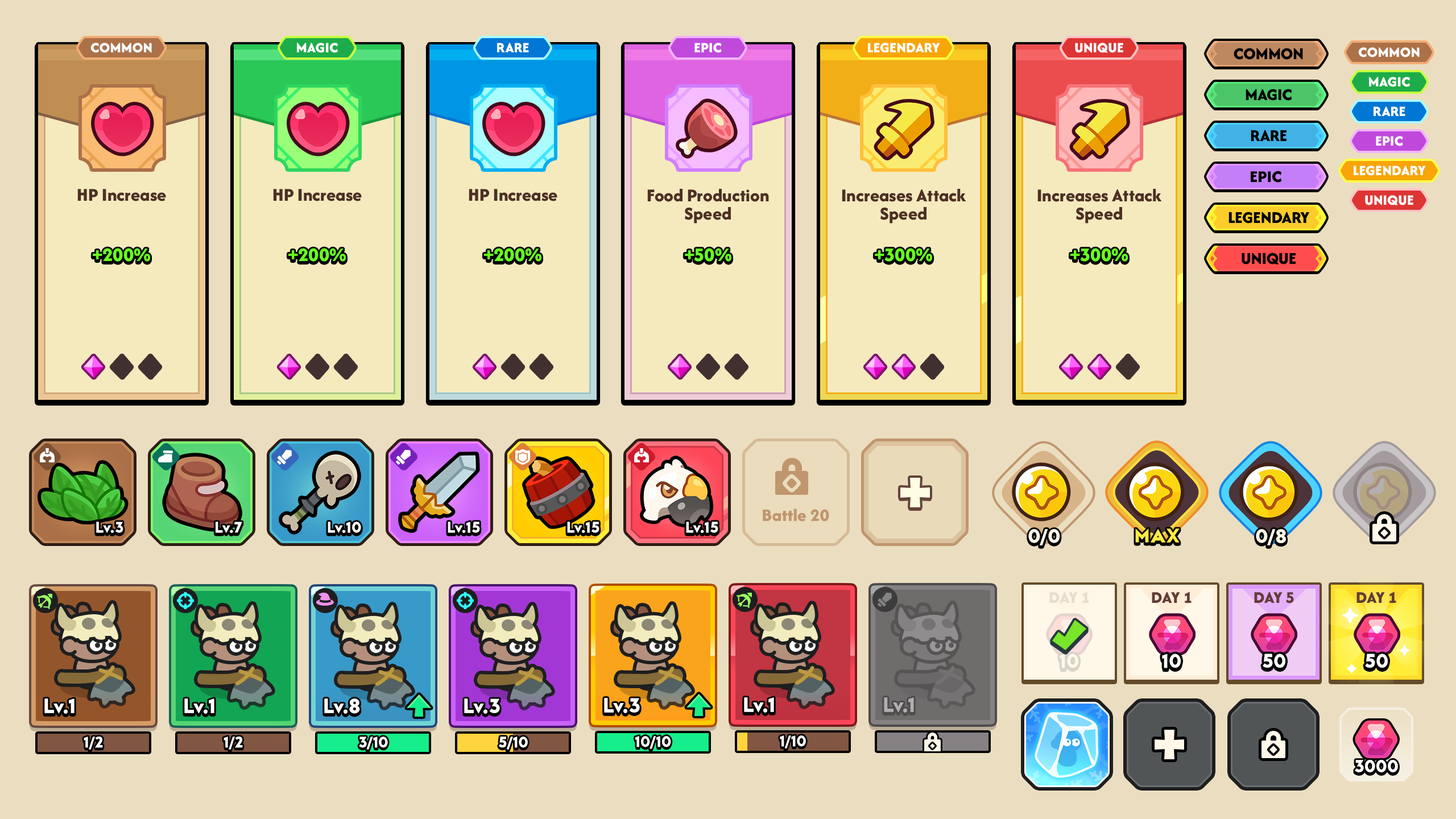
<style>
.page{position:relative;width:1456px;height:819px;background:#ebdec0}
.page>*{position:absolute;margin:0}
.t1{font:14.8px "AfacadFlux-ExtraBold";color:#ffffff;text-transform:uppercase}
.t2{font:17.2px "AfacadFlux-ExtraBold";letter-spacing:-0.02em;color:#000000;text-transform:uppercase}
.t3{font:17.1px "AfacadFlux-ExtraBold";color:#000000;text-transform:uppercase}
.t4{font:18.8px "AfacadFlux-ExtraBold";color:#4d3024}
.t5{font:18.8px/18.2px "AfacadFlux-ExtraBold";color:#4d3024}
.t6{font:19.9px "AfacadFlux-ExtraBold";color:#69ff20;text-transform:uppercase}
.t7{font:18.2px "AfacadFlux-ExtraBold";color:#c0966e}
.t8{font:15.9px "LTAvocado-Bold";color:#ffffff}
.t9{font:20.5px "LTAvocado-Bold";color:#fff8e9;text-transform:uppercase}
.t10{font:20.5px "LTAvocado-Bold";color:#ffeb44;text-transform:uppercase}
.t11{font:17.1px "AfacadFlux-ExtraBold";color:#e8dcce;text-transform:uppercase}
.t12{font:17.1px "AfacadFlux-ExtraBold";color:#633b37;text-transform:uppercase}
.t13{font:20.5px "LTAvocado-Bold";color:#ffffff}
.t14{font:21.3px "LTAvocado-Bold";color:#ffffff}
.t15{font:21.3px "LTAvocado-Bold";color:#b1b0b0}
.t16{font:18.2px "LTAvocado-Bold";color:#ffffff;text-transform:uppercase}
</style>
<div class="page">
<p class="t1" style="left:90px;top:43px;width:62px;height:10px">Common</p>
<p class="t1" style="left:297px;top:43px;width:41px;height:10px">Magic</p>
<p class="t1" style="left:497px;top:43px;width:32px;height:9px">Rare</p>
<p class="t1" style="left:694px;top:43px;width:28px;height:10px">Epic</p>
<p class="t1" style="left:868px;top:43px;width:72px;height:10px">Legendary</p>
<p class="t1" style="left:1075px;top:43px;width:48px;height:10px">Unique</p>
<p class="t2" style="left:1234px;top:48px;width:69px;height:12px">Common</p>
<p class="t1" style="left:1358px;top:47px;width:62px;height:10px">Common</p>
<p class="t1" style="left:1369px;top:77px;width:41px;height:10px">Magic</p>
<p class="t2" style="left:1246px;top:89px;width:46px;height:12px">Magic</p>
<p class="t1" style="left:1374px;top:106px;width:31px;height:10px">Rare</p>
<p class="t2" style="left:1251px;top:130px;width:35px;height:11px">Rare</p>
<p class="t1" style="left:1376px;top:136px;width:27px;height:10px">Epic</p>
<p class="t3" style="left:1251px;top:171px;width:31px;height:12px">Epic</p>
<p class="t1" style="left:1354px;top:166px;width:72px;height:10px">Legendary</p>
<p class="t4" style="left:77px;top:189px;width:89px;height:12px">HP Increase</p>
<p class="t4" style="left:273px;top:189px;width:89px;height:12px">HP Increase</p>
<p class="t4" style="left:469px;top:189px;width:88px;height:12px">HP Increase</p>
<p class="t5" style="left:647px;top:189px;width:122px;height:35px;text-align:center">Food Production<br>Speed</p>
<p class="t5" style="left:842px;top:189px;width:124px;height:35px;text-align:center">Increases Attack<br>Speed</p>
<p class="t5" style="left:1037px;top:189px;width:125px;height:35px;text-align:center">Increases Attack<br>Speed</p>
<p class="t1" style="left:1365px;top:195px;width:48px;height:10px">Unique</p>
<p class="t2" style="left:1228px;top:212px;width:82px;height:12px">Legendary</p>
<p class="t6" style="left:93px;top:248px;width:57px;height:14px">+200%</p>
<p class="t6" style="left:288px;top:248px;width:58px;height:14px">+200%</p>
<p class="t6" style="left:484px;top:248px;width:57px;height:14px">+200%</p>
<p class="t6" style="left:685px;top:248px;width:46px;height:14px">+50%</p>
<p class="t6" style="left:875px;top:248px;width:57px;height:14px">+300%</p>
<p class="t6" style="left:1070px;top:248px;width:58px;height:14px">+300%</p>
<p class="t2" style="left:1242px;top:253px;width:54px;height:11px">unique</p>
<p class="t7" style="left:763px;top:508px;width:66px;height:14px">Battle 20</p>
<p class="t8" style="left:96px;top:522px;width:27px;height:11px">Lv.3</p>
<p class="t8" style="left:216px;top:522px;width:26px;height:11px">Lv.7</p>
<p class="t8" style="left:328px;top:522px;width:33px;height:11px">Lv.10</p>
<p class="t8" style="left:448px;top:522px;width:32px;height:11px">Lv.15</p>
<p class="t8" style="left:567px;top:522px;width:32px;height:11px">Lv.15</p>
<p class="t8" style="left:686px;top:522px;width:32px;height:11px">Lv.15</p>
<p class="t9" style="left:1028px;top:529px;width:32px;height:16px">0/0</p>
<p class="t10" style="left:1135px;top:528px;width:45px;height:15px">Max</p>
<p class="t9" style="left:1256px;top:529px;width:30px;height:16px">0/8</p>
<p class="t11" style="left:1049px;top:591px;width:40px;height:12px">Day 1</p>
<p class="t12" style="left:1152px;top:591px;width:40px;height:12px">Day 1</p>
<p class="t12" style="left:1254px;top:592px;width:40px;height:11px">Day 5</p>
<p class="t12" style="left:1356px;top:591px;width:40px;height:12px">Day 1</p>
<p class="t13" style="left:1060px;top:653px;width:18px;height:15px">10</p>
<p class="t13" style="left:1162px;top:653px;width:19px;height:15px">10</p>
<p class="t13" style="left:1263px;top:653px;width:22px;height:15px">50</p>
<p class="t13" style="left:1365px;top:653px;width:23px;height:15px">50</p>
<p class="t14" style="left:44px;top:698px;width:31px;height:16px">Lv.1</p>
<p class="t14" style="left:184px;top:698px;width:30px;height:16px">Lv.1</p>
<p class="t14" style="left:324px;top:698px;width:36px;height:16px">Lv.8</p>
<p class="t14" style="left:464px;top:698px;width:36px;height:16px">Lv.3</p>
<p class="t14" style="left:604px;top:698px;width:36px;height:15px">Lv.3</p>
<p class="t14" style="left:744px;top:697px;width:30px;height:16px">Lv.1</p>
<p class="t15" style="left:884px;top:697px;width:30px;height:16px">Lv.1</p>
<p class="t8" style="left:84px;top:737px;width:19px;height:13px">1/2</p>
<p class="t8" style="left:224px;top:737px;width:19px;height:13px">1/2</p>
<p class="t8" style="left:359px;top:737px;width:29px;height:13px">3/10</p>
<p class="t8" style="left:499px;top:737px;width:29px;height:13px">5/10</p>
<p class="t8" style="left:635px;top:736px;width:36px;height:13px">10/10</p>
<p class="t8" style="left:780px;top:735px;width:26px;height:13px">1/10</p>
<p class="t16" style="left:1355px;top:760px;width:43px;height:12px">3000</p>
</div>
